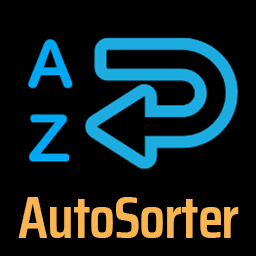
<style>
.page{position:relative;width:256px;height:256px;background:#000000}
.page>*{position:absolute;margin:0}
.t1{font:60px "SairaCondensed-SemiBold";color:#f8b551}
</style>
<div class="page">
<p class="t1" style="left:18px;top:197px;width:221px;height:41px">AutoSorter</p>
</div>
